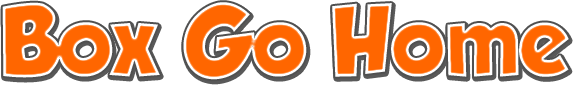
<style>
.page{position:relative;width:573px;height:85px;background:#ffffff}
.page>*{position:absolute;margin:0}
.t1{font:88.8px "GROBOLD";scale:0.96 1}
</style>
<div class="page">
<p class="t1" style="left:2px;top:2px;width:567px;height:78px">Box Go Home</p>
</div>
